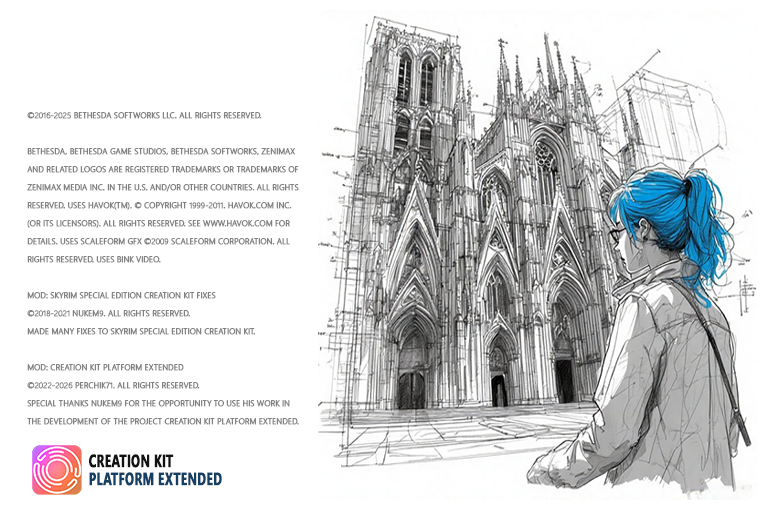
<style>
.page{position:relative;width:768px;height:512px;background:#ffffff}
.page>*{position:absolute;margin:0}
.t1{font:8px/18px "SegoeUI-Light";color:#828282;text-transform:uppercase;font-weight:bold}
.t2{font:18px/18px "SegoeUI-Bold";color:#153f63;text-transform:uppercase;font-weight:bold;scale:0.67 1}
.t3{font:18px/18px "SegoeUI-Bold";color:#121212;text-transform:uppercase;font-weight:bold;scale:0.67 1}
</style>
<div class="page">
<p class="t1" style="left:27px;top:112px;width:272px;height:313px;text-align:right">©2016-2025 Bethesda Softworks LLC. All rights reserved.<br><br>Bethesda, Bethesda Game Studios, Bethesda Softworks, ZeniMax and related logos are registered trademarks or trademarks of ZeniMax Media Inc. in the U.S. and/or other countries. All Rights Reserved. Uses Havok(TM). © Copyright 1999-2011. Havok.com Inc. (or its licensors). All Rights Reserved. See www.havok.com for details. Uses Scaleform GFx ©2009 Scaleform Corporation. All rights reserved. Uses Bink Video.<br><br>MOD: Skyrim special edition creation kit Fixes<br>©2018-2021 Nukem9. All rights reserved.<br>made many FIXES to Skyrim special edition creation kit.<br><br>MOD: Creation Kit Platform Extended<br>©2022-2026 perchik71. All rights reserved.<br>special thanks Nukem9 For the opportunity to use his work in the development of the project Creation Kit Platform Extended.</p>
<p class="t2" style="left:89px;top:454px;width:133px;height:32px;text-align:right"><span class="t3">CREATION KIT <br></span>PLATFORM EXTENDED</p>
</div>
